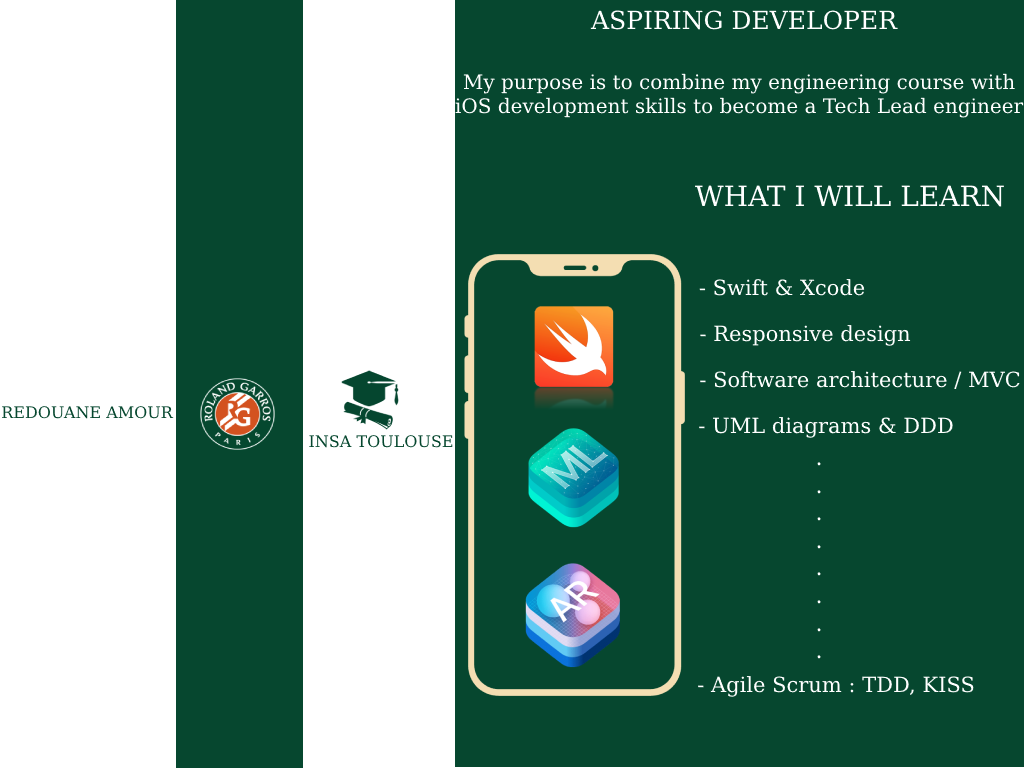
<style>
.page{position:relative;width:1024px;height:768px;background:#06472f}
.page>*{position:absolute;margin:0}
.t1{font:25px "DejaVuSerif";color:#ffffff}
.t2{font:20px "DejaVuSerif";color:#ffffff}
.t3{font:28px "DejaVuSerif";color:#ffffff}
.t4{font:21px "DejaVuSerif";color:#ffffff}
.t5{font:16px "DejaVuSerif";color:#06472f}
.t6{font:23px "DejaVuSerif";color:#ffffff}
</style>
<div class="page">
<p class="t1" style="left:590px;top:10px;width:308px;height:20px">ASPIRING DEVELOPER</p>
<p class="t2" style="left:455px;top:73px;width:569px;height:45px;text-align:center">My purpose is to combine my engineering course with<br>iOS development skills to become a Tech Lead engineer</p>
<p class="t3" style="left:695px;top:185px;width:309px;height:22px">WHAT I WILL LEARN</p>
<p class="t4" style="left:699px;top:279px;width:166px;height:17px">- Swift &amp; Xcode</p>
<p class="t4" style="left:700px;top:325px;width:211px;height:21px">- Responsive design</p>
<p class="t4" style="left:700px;top:371px;width:320px;height:18px">- Software architecture / MVC</p>
<p class="t5" style="left:2px;top:406px;width:172px;height:13px">REDOUANE AMOUR</p>
<p class="t4" style="left:699px;top:417px;width:254px;height:21px">- UML diagrams &amp; DDD</p>
<p class="t5" style="left:309px;top:435px;width:144px;height:13px">INSA TOULOUSE</p>
<p class="t6" style="left:817px;top:462px;width:4px;height:197px;text-align:center">.<br>.<br>.<br>.<br>.<br>.<br>.<br>.</p>
<p class="t4" style="left:698px;top:676px;width:276px;height:21px">- Agile Scrum : TDD, KISS</p>
</div>
